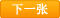
<style>
.page{position:relative;width:60px;height:18px}
.page>*{position:absolute;margin:0}
.t1{font:12px "SimSun";color:#ffffff;font-weight:bold}
</style>
<div class="page">
<p class="t1" style="left:12px;top:3px;width:36px;height:12px">下一张</p>
</div>
